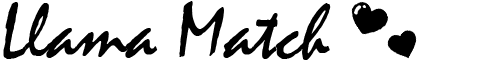
<style>
.page{position:relative;width:500px;height:60px;background:#ffffff}
.page>*{position:absolute;margin:0}
.t1{font:80px "Mistral";color:#000000}
</style>
<div class="page">
<p class="t1" style="left:3px;top:1px;width:328px;height:59px">Llama Match</p>
</div>
